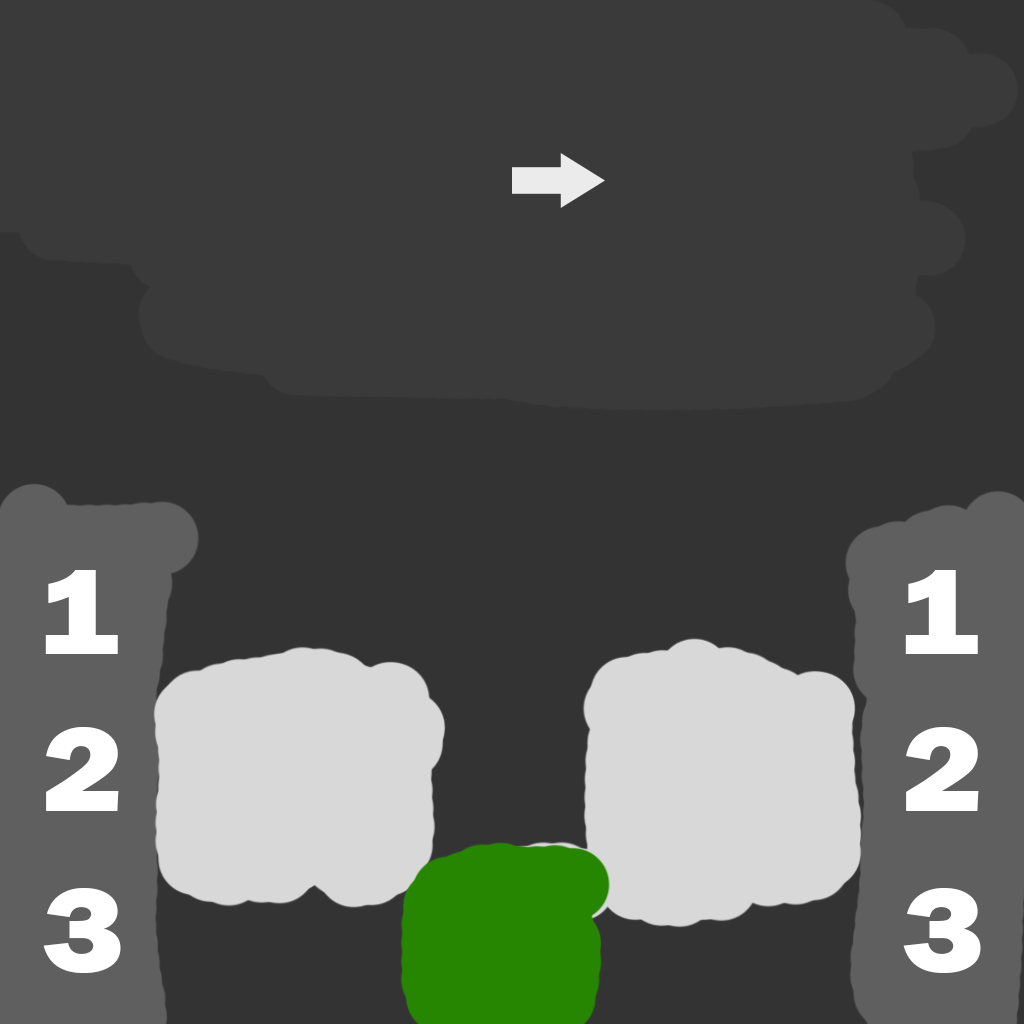
<style>
.page{position:relative;width:1024px;height:1024px;background:#3a3a3a}
.page>*{position:absolute;margin:0}
.t1{font:125px "FranklinGothic-Heavy";color:#ffffff;scale:1.12 1}
</style>
<div class="page">
<p class="t1" style="left:45px;top:570px;width:73px;height:84px">1</p>
<p class="t1" style="left:905px;top:570px;width:73px;height:84px">1</p>
<p class="t1" style="left:46px;top:727px;width:73px;height:84px">2</p>
<p class="t1" style="left:906px;top:727px;width:73px;height:84px">2</p>
<p class="t1" style="left:43px;top:888px;width:78px;height:85px">3</p>
<p class="t1" style="left:903px;top:888px;width:78px;height:85px">3</p>
</div>
